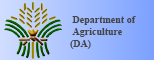
<style>
.page{position:relative;width:154px;height:60px}
.page>*{position:absolute;margin:0}
.t1{font:10px "TimesNewRomanPS-BoldMT";color:#454545}
</style>
<div class="page">
<p class="t1" style="left:70px;top:16px;width:66px;height:33px;text-align:right">Department of <br>Agriculture <br>(DA)</p>
</div>
